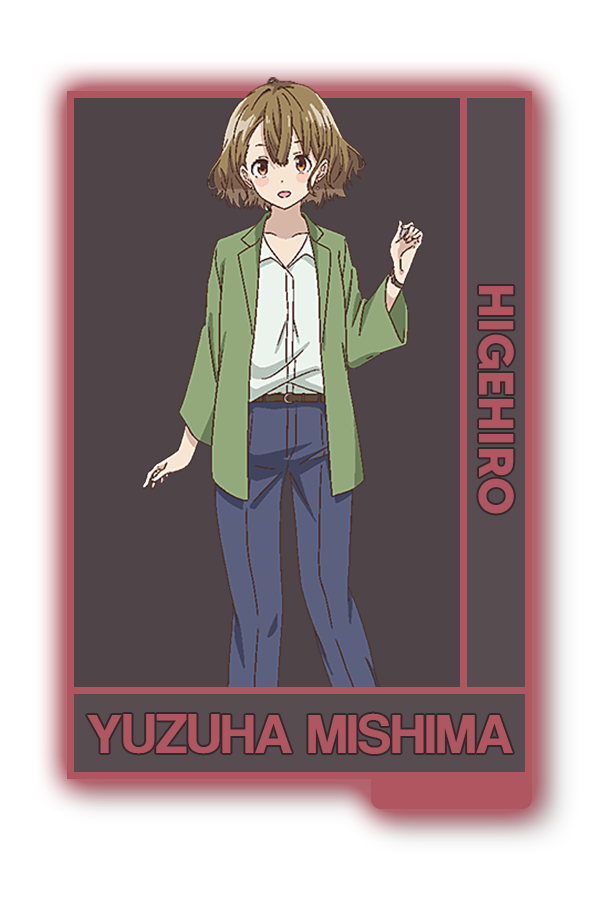
<style>
.page{position:relative;width:600px;height:900px;background:#4f4448}
.page>*{position:absolute;margin:0}
.t1{font:48.8px "MADETOMMY-Bold";color:#b05661}
.t2{font:58.1px "CoolveticaRg-Regular";color:#b05661}
</style>
<div class="page">
<p class="t1" style="left:478px;top:286px;width:36px;height:228px;rotate:90deg">HIGEHIRO</p>
<p class="t2" style="left:87px;top:713px;width:426px;height:41px">YUZUHA MISHIMA</p>
</div>
